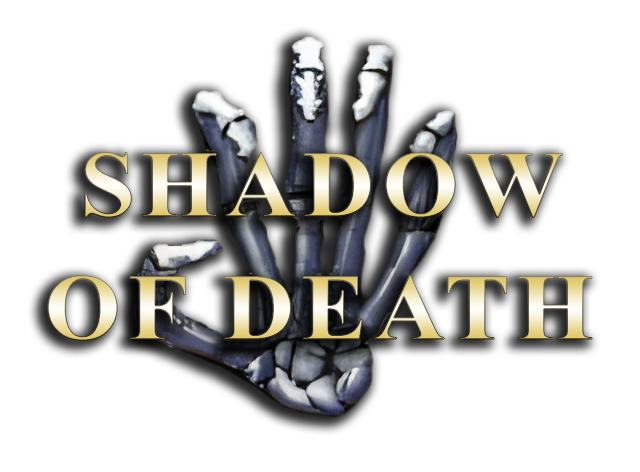
<style>
.page{position:relative;width:640px;height:472px;background:#ffffff}
.page>*{position:absolute;margin:0}
.t1{font:94px "TimesNewRomanPS-BoldMT";letter-spacing:0.07em;scale:1.05 1}
</style>
<div class="page">
<p class="t1" style="left:84px;top:152px;width:479px;height:66px">SHADOW</p>
<p class="t1" style="left:47px;top:275px;width:545px;height:66px">OF DEATH</p>
</div>
